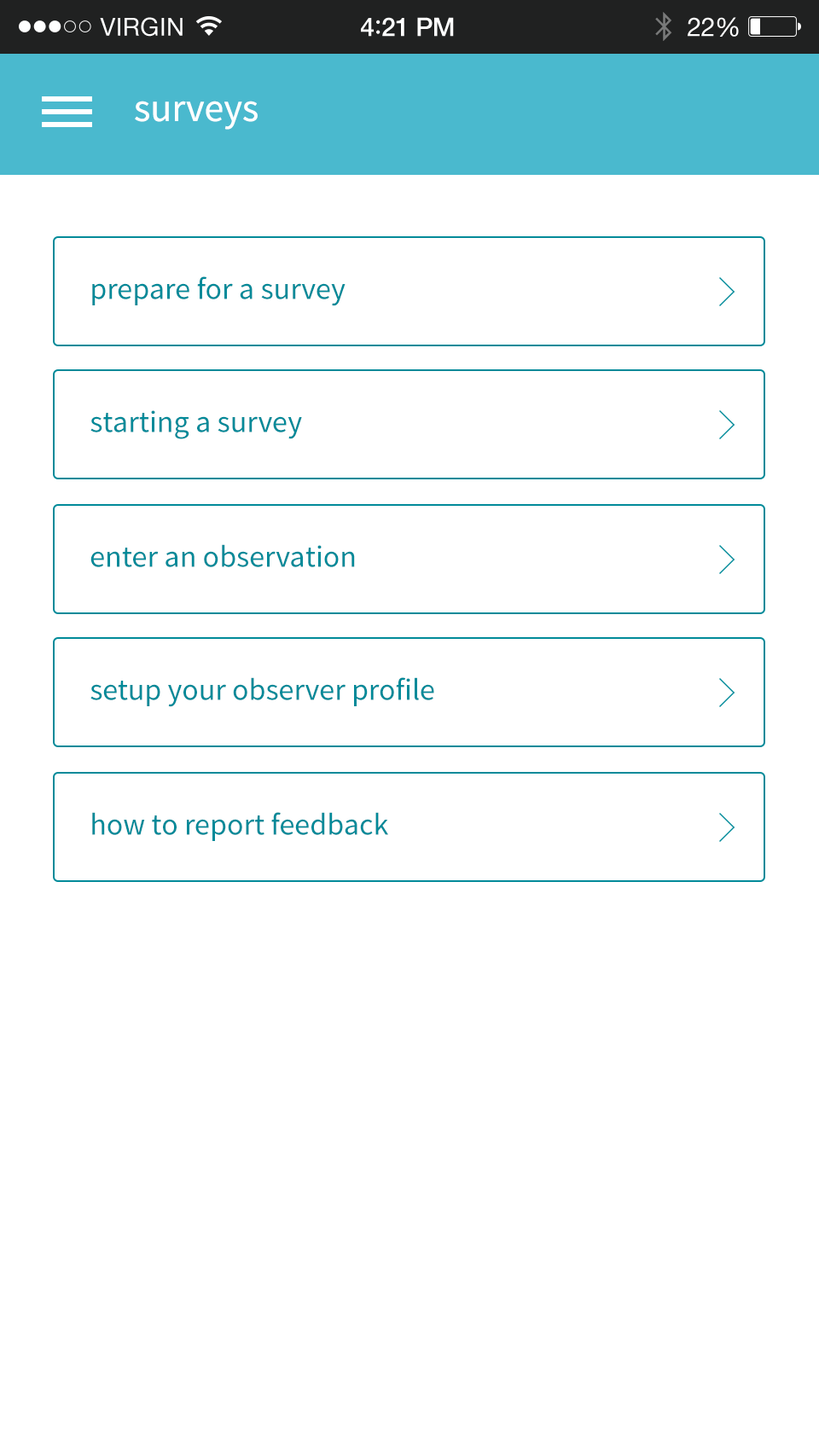
<style>
.page{position:relative;width:819px;height:1456px;background:#ffffff}
.page>*{position:absolute;margin:0}
.t1{font:39.2px "SourceSansPro-Regular";color:#ffffff}
.t2{font:30.7px "SourceSansPro-Regular";color:#008a99}
</style>
<div class="page">
<p class="t1" style="left:135px;top:101px;width:123px;height:29px">surveys</p>
<p class="t2" style="left:92px;top:276px;width:253px;height:30px">prepare for a survey</p>
<p class="t2" style="left:90px;top:410px;width:212px;height:29px">starting a survey</p>
<p class="t2" style="left:90px;top:544px;width:265px;height:23px">enter an observation</p>
<p class="t2" style="left:90px;top:677px;width:344px;height:30px">setup your observer profile</p>
<p class="t2" style="left:92px;top:812px;width:296px;height:29px">how to report feedback</p>
</div>
